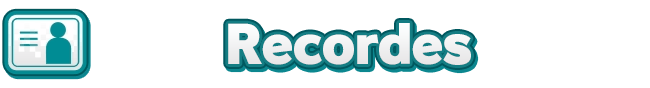
<style>
.page{position:relative;width:650px;height:88px;background:#ffffff}
.page>*{position:absolute;margin:0}
.t1{font:52px "RodinPro-UB";letter-spacing:-0.041em;color:#f0f0f1}
</style>
<div class="page">
<p class="t1" style="left:228px;top:23px;width:243px;height:42px">Recordes</p>
</div>
